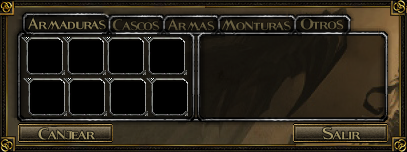
<style>
.page{position:relative;width:407px;height:152px}
.page>*{position:absolute;margin:0}
.t1{font:30px "Fleet-Street";color:#8f845a}
.t2{font:30px "Fleet-Street";color:#625a3e}
.t3{font:30px "Fleet-Street";color:#635a3e}
.t4{font:30px "Fleet-Street";color:#696041}
.t5{font:30px "Fleet-Street";color:#655c3f}
.t6{font:30px "Fleet-Street";color:#a19365}
.t7{font:30px "Fleet-Street";color:#a29466}
</style>
<div class="page">
<p class="t1" style="left:27px;top:17px;width:79px;height:13px">Armaduras</p>
<p class="t2" style="left:112px;top:19px;width:48px;height:12px">Cascos</p>
<p class="t3" style="left:167px;top:18px;width:48px;height:13px">Armas</p>
<p class="t4" style="left:221px;top:19px;width:70px;height:12px">Monturas</p>
<p class="t5" style="left:300px;top:18px;width:44px;height:12px">Otros</p>
<p class="t6" style="left:38px;top:128px;width:57px;height:12px">Canjear</p>
<p class="t7" style="left:322px;top:127px;width:39px;height:13px">Salir</p>
</div>
